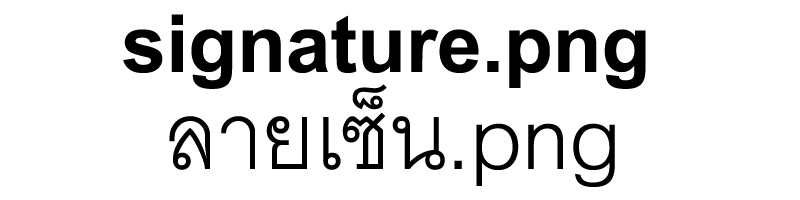
<style>
.page{position:relative;width:800px;height:200px;background:#ffffff}
.page>*{position:absolute;margin:0}
.t1{font:80px "Arial-BoldMT";color:#000000}
.t2{font:130px "CordiaNew";color:#000000}
</style>
<div class="page">
<p class="t1" style="left:123px;top:14px;width:523px;height:75px">signature.png</p>
<p class="t2" style="left:169px;top:84px;width:446px;height:103px">ลายเซ็น.png</p>
</div>
